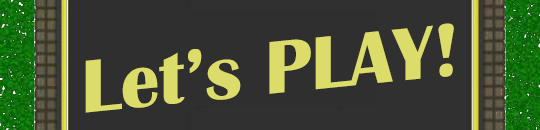
<style>
.page{position:relative;width:540px;height:130px;background:#2f2f2f}
.page>*{position:absolute;margin:0}
.t1{font:77.4px "BritannicBold";color:#dbdc6a}
</style>
<div class="page">
<p class="t1" style="left:85px;top:23px;width:369px;height:90px;rotate:-6deg">Let’s PLAY!</p>
</div>
